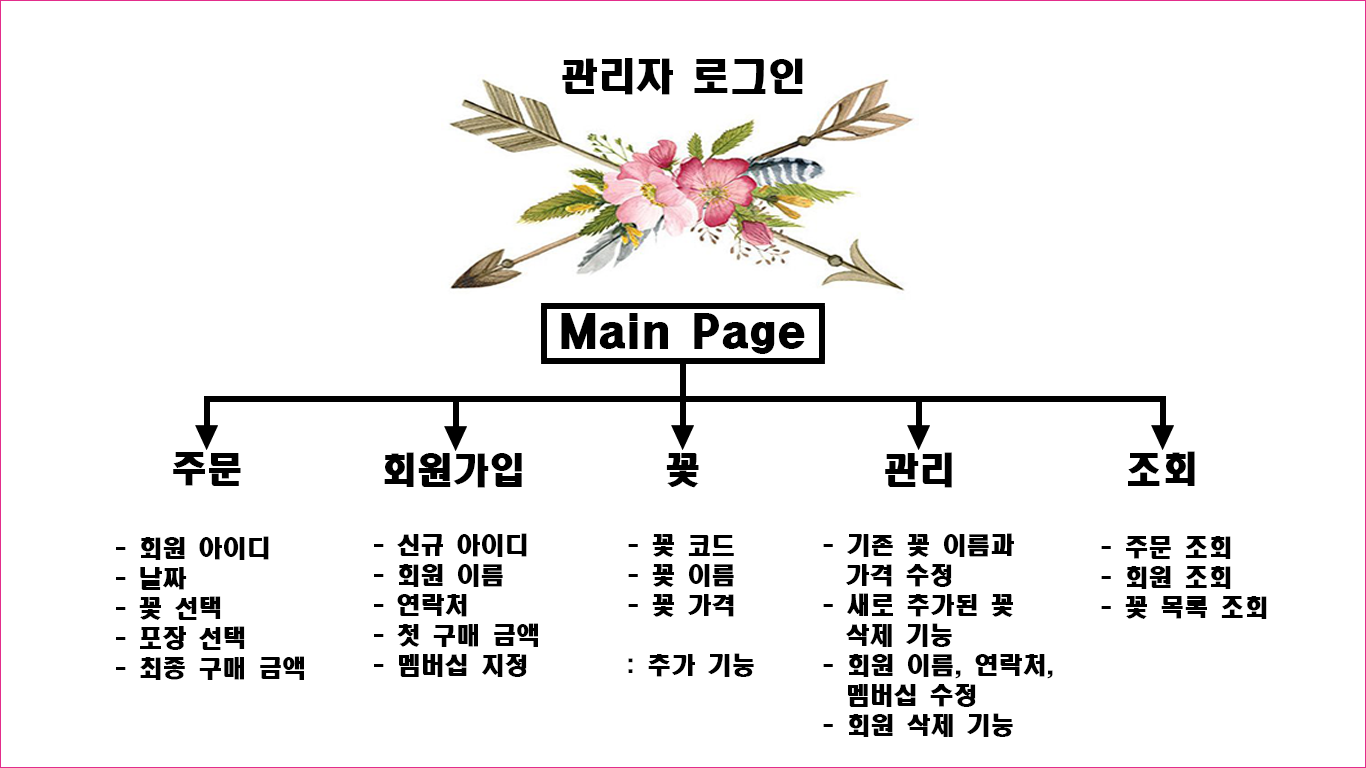
<style>
.page{position:relative;width:1366px;height:768px;background:#ffffff}
.page>*{position:absolute;margin:0}
.t1{font:38px "HeadlineR-HM";color:#000000}
.t2{font:41.7px "HeadlineR-HM";color:#000000}
.t3{font:36px "HeadlineR-HM";color:#000000}
.t4{font:24px/30px "HeadlineR-HM";color:#000000}
</style>
<div class="page">
<p class="t1" style="left:562px;top:58px;width:241px;height:37px">관리자 로그인</p>
<p class="t2" style="left:561px;top:313px;width:244px;height:41px">Main Page</p>
<p class="t3" style="left:173px;top:452px;width:68px;height:34px">주문</p>
<p class="t3" style="left:384px;top:452px;width:138px;height:36px">회원가입</p>
<p class="t3" style="left:666px;top:453px;width:33px;height:35px">꽃</p>
<p class="t3" style="left:885px;top:452px;width:67px;height:36px">관리</p>
<p class="t3" style="left:1128px;top:451px;width:67px;height:35px">조회</p>
<p class="t4" style="left:374px;top:533px;width:164px;height:144px">- 신규 아이디<br>- 회원 이름<br>- 연락처<br>- 첫 구매 금액<br>- 멤버십 지정</p>
<p class="t4" style="left:628px;top:534px;width:126px;height:143px">- 꽃 코드<br>- 꽃 이름<br>- 꽃 가격<br><br>: 추가 기능</p>
<p class="t4" style="left:823px;top:533px;width:230px;height:204px">- 기존 꽃 이름과 <br>  가격 수정<br>- 새로 추가된 꽃<br>  삭제 기능<br>- 회원 이름, 연락처,<br>  멤버십 수정<br>- 회원 삭제 기능</p>
<p class="t4" style="left:116px;top:536px;width:188px;height:144px">- 회원 아이디<br>- 날짜<br>- 꽃 선택<br>- 포장 선택<br>- 최종 구매 금액</p>
<p class="t4" style="left:1101px;top:536px;width:166px;height:83px">- 주문 조회<br>- 회원 조회<br>- 꽃 목록 조회</p>
</div>
